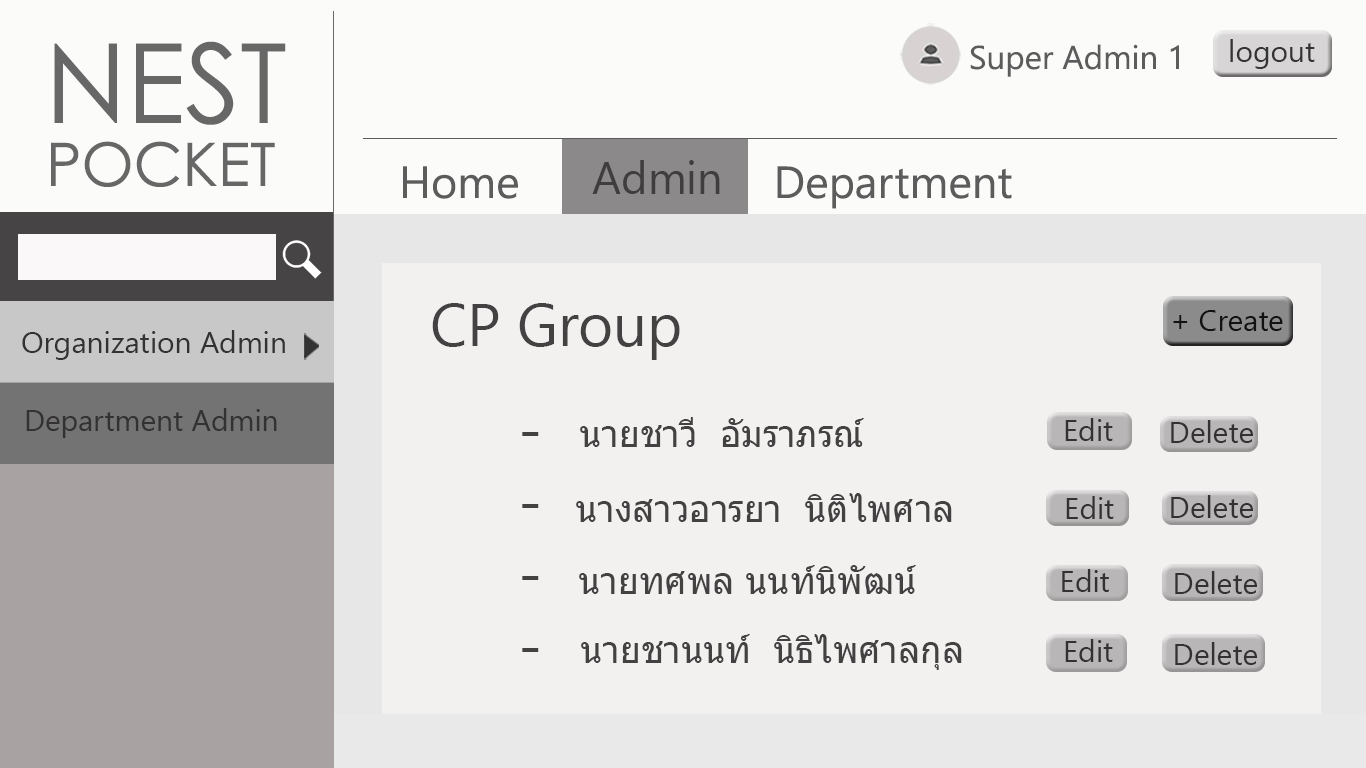
<style>
.page{position:relative;width:1366px;height:768px;background:#f3f0f0}
.page>*{position:absolute;margin:0}
.t1{font:110px "CenturyGothic";color:#676767}
.t2{font:90px "CenturyGothic";color:#676767}
.t3{font:30px "SegoeUI";color:#353434}
.t4{font:33px "SegoeUI";color:#5d5c5c}
.t5{font:60px "CenturyGothic";color:#676767}
.t6{font:45px "SegoeUI";color:#3f3d3d}
.t7{font:45px "SegoeUI";color:#5d5c5c}
.t8{font:60px "SegoeUI";color:#434141}
.t9{font:30px "SegoeUI";color:#131212}
.t10{font:30px "SegoeUI";color:#333131}
.t11{font:36px "Tahoma";color:#434141}
</style>
<div class="page">
<p class="t1" style="left:54px;top:41px;width:232px;height:84px"><span class="t2"><br></span>NEST</p>
<p class="t3" style="left:1230px;top:39px;width:85px;height:30px">logout</p>
<p class="t4" style="left:970px;top:44px;width:209px;height:33px">Super Admin 1</p>
<p class="t5" style="left:51px;top:141px;width:224px;height:46px">POCKET</p>
<p class="t6" style="left:592px;top:160px;width:128px;height:34px">Admin</p>
<p class="t7" style="left:403px;top:164px;width:609px;height:45px">Home        Admin  Department</p>
<p class="t8" style="left:432px;top:303px;width:248px;height:57px">CP Group</p>
<p class="t9" style="left:1173px;top:310px;width:110px;height:21px">+ Create</p>
<p class="t10" style="left:22px;top:330px;width:263px;height:30px">Organization Admin</p>
<p class="t10" style="left:26px;top:408px;width:251px;height:30px">Department Admin</p>
<p class="t11" style="left:580px;top:417px;width:284px;height:30px">นายชาวี  อัมราภรณ์</p>
<p class="t10" style="left:1065px;top:418px;width:48px;height:23px">Edit</p>
<p class="t10" style="left:1171px;top:420px;width:82px;height:23px">Delete</p>
<p class="t8" style="left:522px;top:432px;width:17px;height:220px">-<br>-<br>-<br>-</p>
<p class="t11" style="left:576px;top:493px;width:376px;height:29px">นางสาวอารยา  นิติไพศาล</p>
<p class="t10" style="left:1066px;top:496px;width:48px;height:23px">Edit</p>
<p class="t10" style="left:1171px;top:495px;width:82px;height:23px">Delete</p>
<p class="t11" style="left:579px;top:565px;width:337px;height:29px">นายทศพล นนท์นิพัฒน์</p>
<p class="t10" style="left:1062px;top:569px;width:47px;height:23px">Edit</p>
<p class="t10" style="left:1175px;top:571px;width:82px;height:23px">Delete</p>
<p class="t11" style="left:581px;top:634px;width:381px;height:36px">นายชานนท์  นิธิไพศาลกุล</p>
<p class="t10" style="left:1065px;top:639px;width:48px;height:23px">Edit</p>
<p class="t10" style="left:1175px;top:642px;width:82px;height:23px">Delete</p>
</div>
